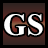
<style>
.page{position:relative;width:48px;height:48px;background:#000000}
.page>*{position:absolute;margin:0}
.t1{font:30.6px "TimesNewRomanPS-BoldMT";color:#ffffff;font-variant:small-caps}
</style>
<div class="page">
<p class="t1" style="left:4px;top:14px;width:39px;height:22px">GS</p>
</div>
